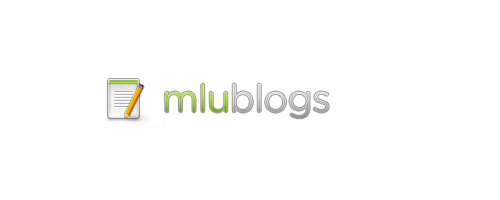
<style>
.page{position:relative;width:500px;height:200px;background:#ffffff}
.page>*{position:absolute;margin:0}
.t1{font:38.5px "GothamRounded-Book";letter-spacing:-0.025em}
</style>
<div class="page">
<p class="t1" style="left:165px;top:83px;width:164px;height:36px">mlublogs</p>
<p class="t1" style="left:165px;top:83px;width:164px;height:36px">mlublogs</p>
</div>
